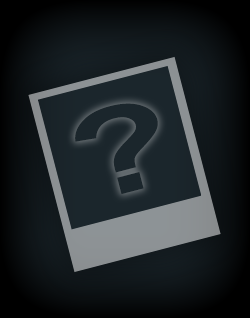
<style>
.page{position:relative;width:250px;height:318px}
.page>*{position:absolute;margin:0}
.t1{font:121.3px "Arial-BoldMT";letter-spacing:-0.03em;color:#1b262c;scale:1.36 1}
</style>
<div class="page">
<p class="t1" style="left:75px;top:103px;width:83px;height:91px;rotate:-15deg">?</p>
</div>
